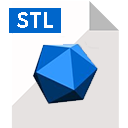
<style>
.page{position:relative;width:128px;height:128px;background:#e6e2e1}
.page>*{position:absolute;margin:0}
.t1{font:21px "TaipeiSansTCBeta-Bold";color:#ffffff}
</style>
<div class="page">
<p class="t1" style="left:17px;top:12px;width:36px;height:16px">STL</p>
</div>
